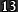
<style>
.page{position:relative;width:18px;height:12px;background:#333333}
.page>*{position:absolute;margin:0}
.t1{font:17px "Perpetua-Bold";color:#ffffff}
</style>
<div class="page">
<p class="t1" style="left:2px;top:1px;width:14px;height:10px">13</p>
</div>
